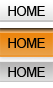
<style>
.page{position:relative;width:53px;height:88px}
.page>*{position:absolute;margin:0}
.t1{font:12.7px "ArialMT";color:#000000}
</style>
<div class="page">
<p class="t1" style="left:8px;top:6px;width:37px;height:10px">HOME</p>
<p class="t1" style="left:8px;top:38px;width:37px;height:10px">HOME</p>
<p class="t1" style="left:8px;top:67px;width:37px;height:10px">HOME</p>
</div>
